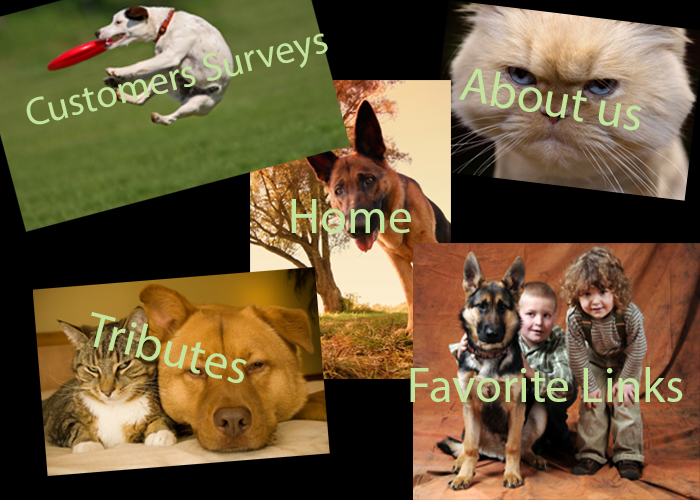
<style>
.page{position:relative;width:700px;height:500px;background:#000000}
.page>*{position:absolute;margin:0}
.t1{font:39.3px "MyriadPro-Regular";color:#c3e49c}
.t2{font:49px "MyriadPro-Regular";color:#c3e49c}
</style>
<div class="page">
<p class="t1" style="left:26px;top:33px;width:302px;height:92px;rotate:-14deg">Customers Surveys</p>
<p class="t2" style="left:459px;top:68px;width:183px;height:63px;rotate:10deg">About us</p>
<p class="t2" style="left:291px;top:199px;width:120px;height:34px">Home</p>
<p class="t2" style="left:91px;top:312px;width:156px;height:71px;rotate:14deg">Tributes</p>
<p class="t2" style="left:410px;top:367px;width:273px;height:35px">Favorite Links</p>
</div>
